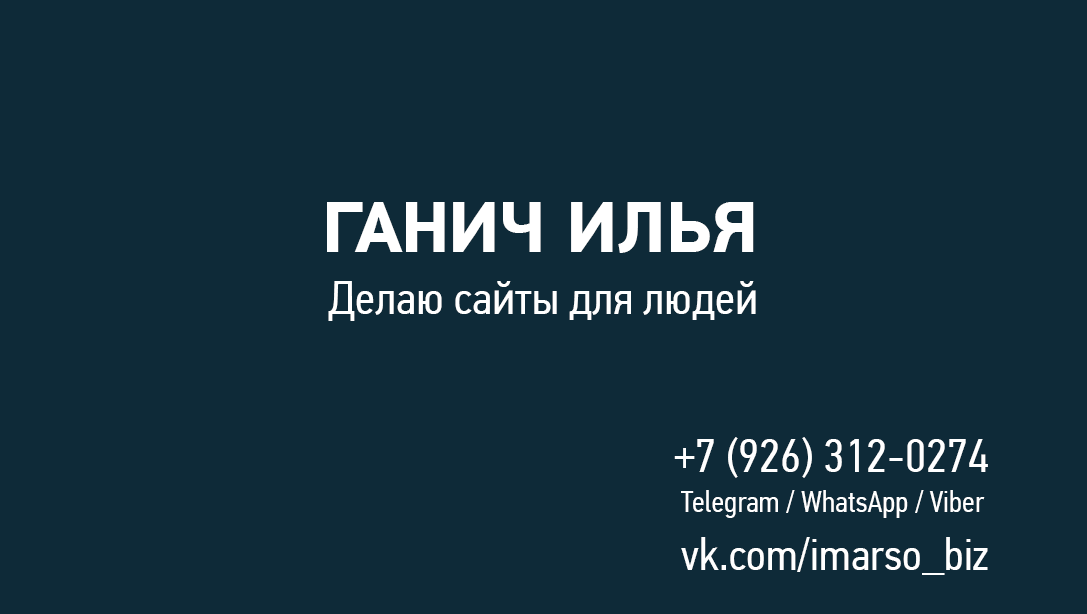
<style>
.page{position:relative;width:1087px;height:614px;background:#0e2a38}
.page>*{position:absolute;margin:0}
.t1{font:72px "PFDinTextPro-Bold";color:#ffffff}
.t2{font:72px "PFDinTextPro-Bold";letter-spacing:-0.02em;color:#ffffff}
.t3{font:47px "PFDinTextCondPro-Regular";color:#ffffff}
.t4{font:48px "PFDinTextCondPro-Regular";color:#ffffff}
.t5{font:30px "PFDinTextCondPro-Regular";color:#ffffff}
.t6{font:45px "PFDinTextCondPro-Regular";color:#ffffff}
</style>
<div class="page">
<p class="t1" style="left:327px;top:202px;width:427px;height:51px">Г<span class="t2">АН</span>ИЧ ИЛЬЯ</p>
<p class="t3" style="left:328px;top:281px;width:428px;height:40px">Делаю сайты для людей</p>
<p class="t4" style="left:674px;top:437px;width:314px;height:41px">+7 (926) 312-0274</p>
<p class="t5" style="left:681px;top:490px;width:304px;height:28px">Telegram / WhatsApp / Viber</p>
<p class="t6" style="left:681px;top:537px;width:307px;height:38px">vk.com/imarso_biz</p>
</div>
